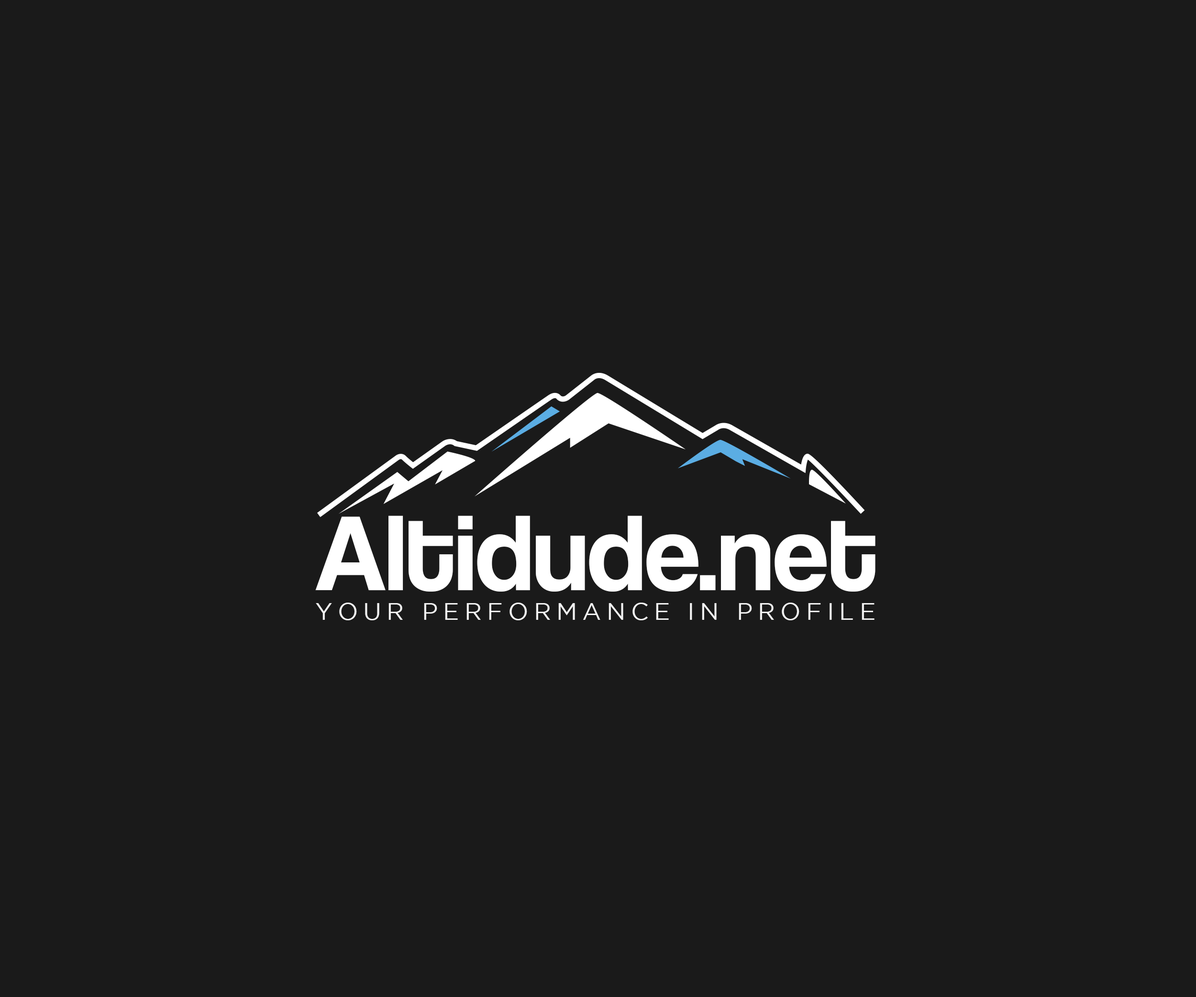
<style>
.page{position:relative;width:1196px;height:997px;background:#1a1a1a}
.page>*{position:absolute;margin:0}
.t1{font:110.5px "CoolveticaRg-Regular";color:#ffffff}
.t2{font:23.9px "GothamBook";letter-spacing:0.222em;color:#f2f2f2}
</style>
<div class="page">
<p class="t1" style="left:315px;top:515px;width:561px;height:76px">Altidude.net</p>
<p class="t2" style="left:316px;top:602px;width:559px;height:18px">YOUR PERFORMANCE IN PROFILE</p>
</div>
